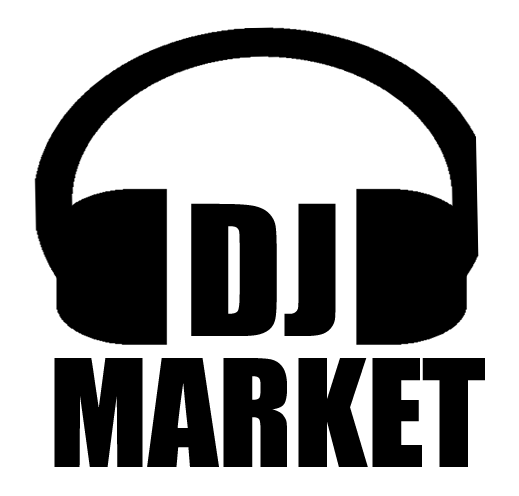
<style>
.page{position:relative;width:519px;height:496px;background:#ffffff}
.page>*{position:absolute;margin:0}
.t1{font:166.9px "Impact";color:#000000;scale:1.07 1}
.t2{font:138.3px "Impact";color:#000000}
</style>
<div class="page">
<p class="t1" style="left:191px;top:203px;width:145px;height:133px">DJ</p>
<p class="t2" style="left:54px;top:358px;width:431px;height:109px">MARKET</p>
</div>
